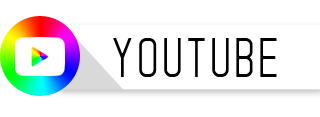
<style>
.page{position:relative;width:320px;height:117px;background:#ffffff}
.page>*{position:absolute;margin:0}
.t1{font:49.6px "078MKSDMediumCondensed";letter-spacing:0.1em;color:#000000}
</style>
<div class="page">
<p class="t1" style="left:113px;top:38px;width:164px;height:39px">YOUTUBE</p>
</div>
